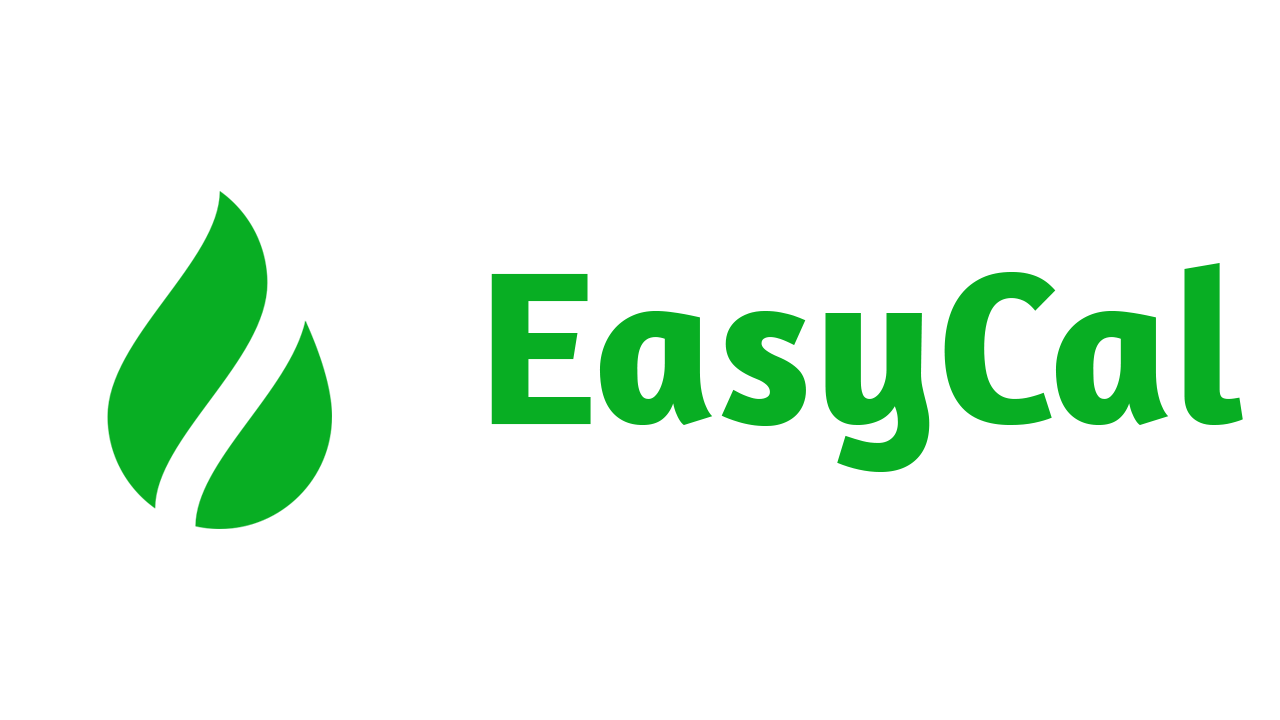
<style>
.page{position:relative;width:1280px;height:720px;background:#ffffff}
.page>*{position:absolute;margin:0}
.t1{font:222.4px "Amaranth-Bold";letter-spacing:0.01em;color:#08ae23}
</style>
<div class="page">
<p class="t1" style="left:491px;top:262px;width:752px;height:210px">EasyCal</p>
</div>
